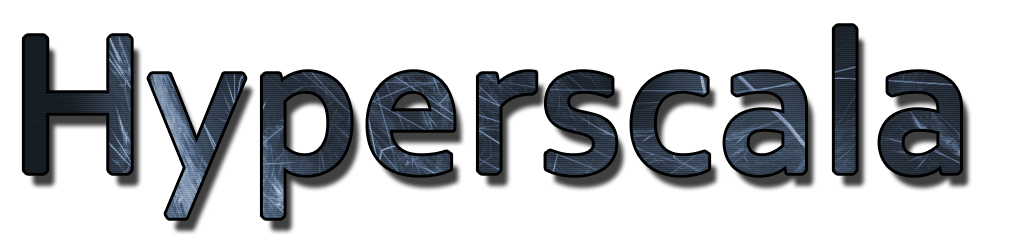
<style>
.page{position:relative;width:1017px;height:246px;background:#ffffff}
.page>*{position:absolute;margin:0}
.t1{font:200px "Corbel";font-weight:bold}
</style>
<div class="page">
<p class="t1" style="left:24px;top:26px;width:936px;height:192px">Hyperscala</p>
</div>
